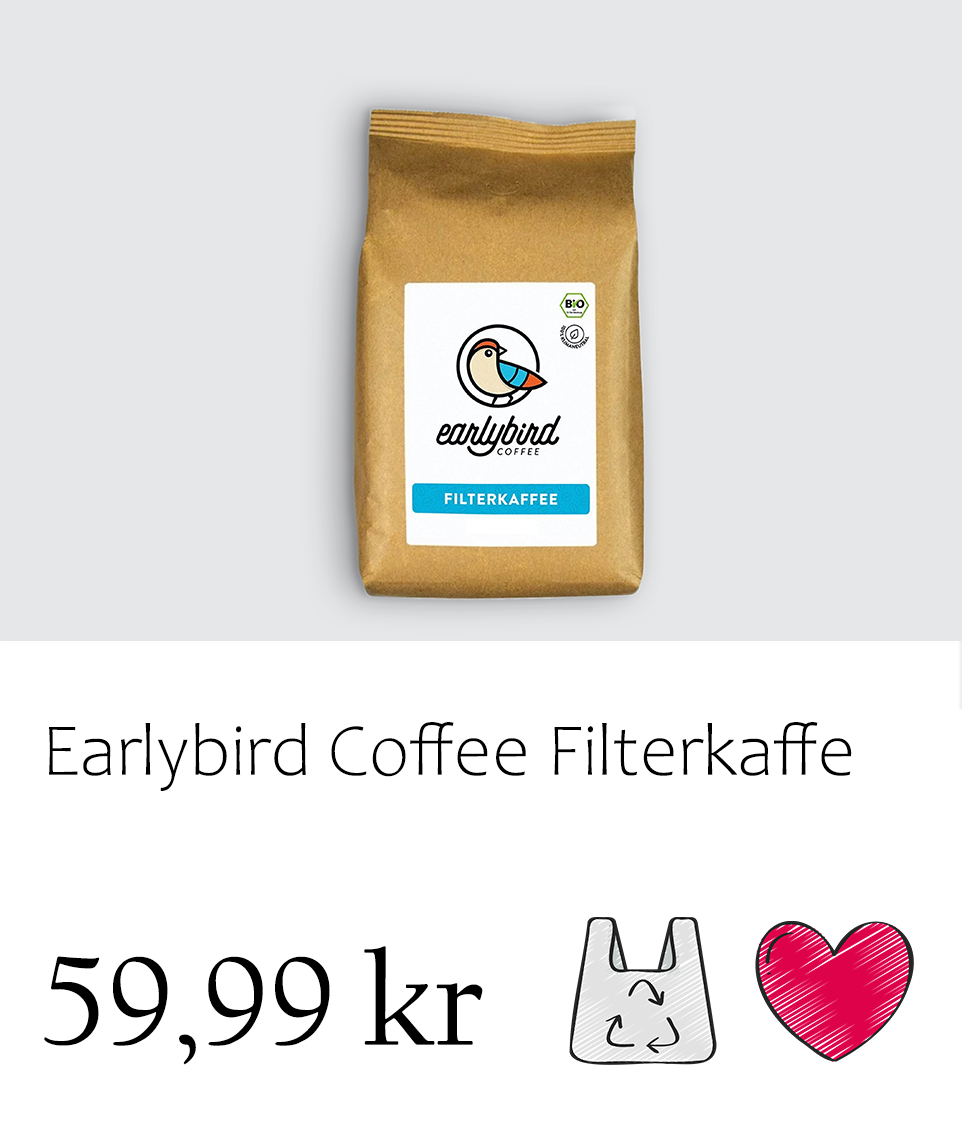
<style>
.page{position:relative;width:962px;height:1138px;background:#ffffff}
.page>*{position:absolute;margin:0}
.t1{font:75px "Candara-Light";color:#000001}
.t2{font:133.3px "CalifornianFB-Reg";color:#000001}
</style>
<div class="page">
<p class="t1" style="left:49px;top:722px;width:803px;height:69px">Earlybird Coffee Filterkaffe</p>
<p class="t2" style="left:44px;top:946px;width:439px;height:119px">59,99 kr</p>
</div>
